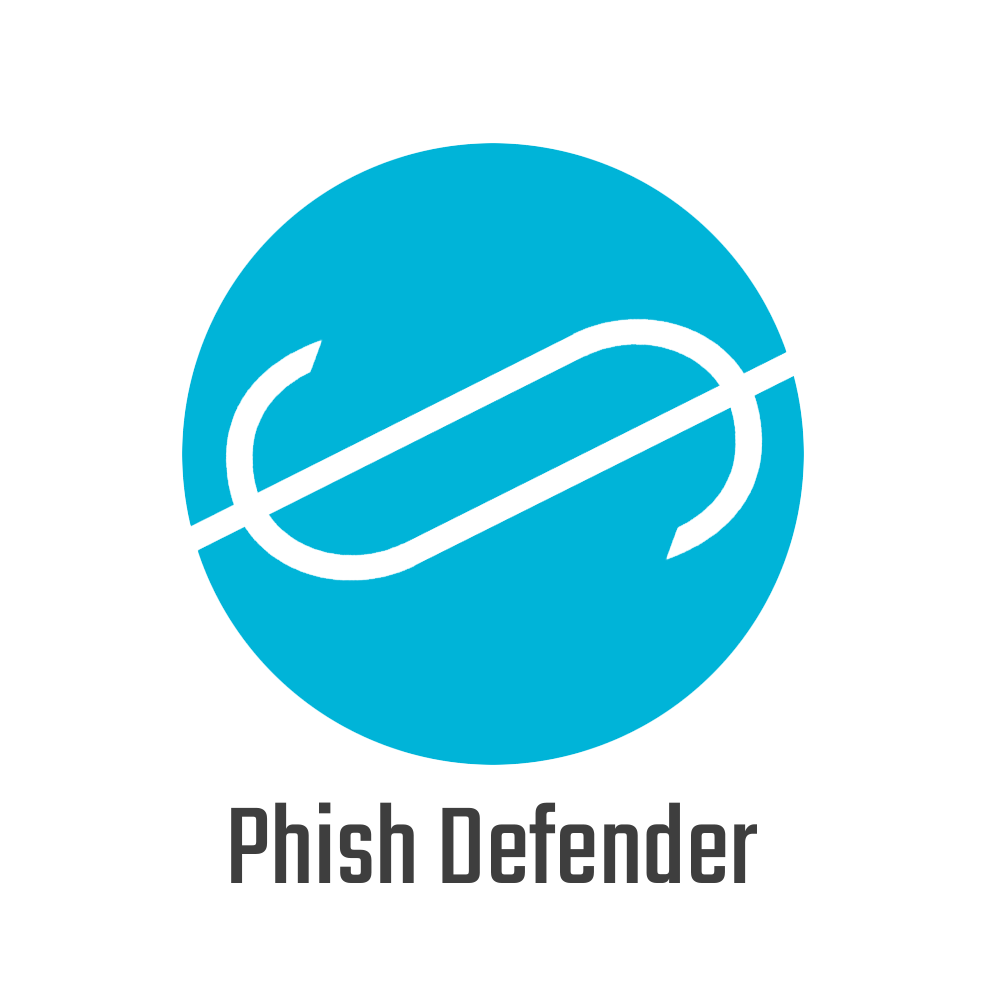
<style>
.page{position:relative;width:1000px;height:1000px;background:#ffffff}
.page>*{position:absolute;margin:0}
.t1{font:120px "Teko-Regular";color:#3e3e3e}
</style>
<div class="page">
<p class="t1" style="left:231px;top:802px;width:526px;height:81px">Phish Defender</p>
</div>
